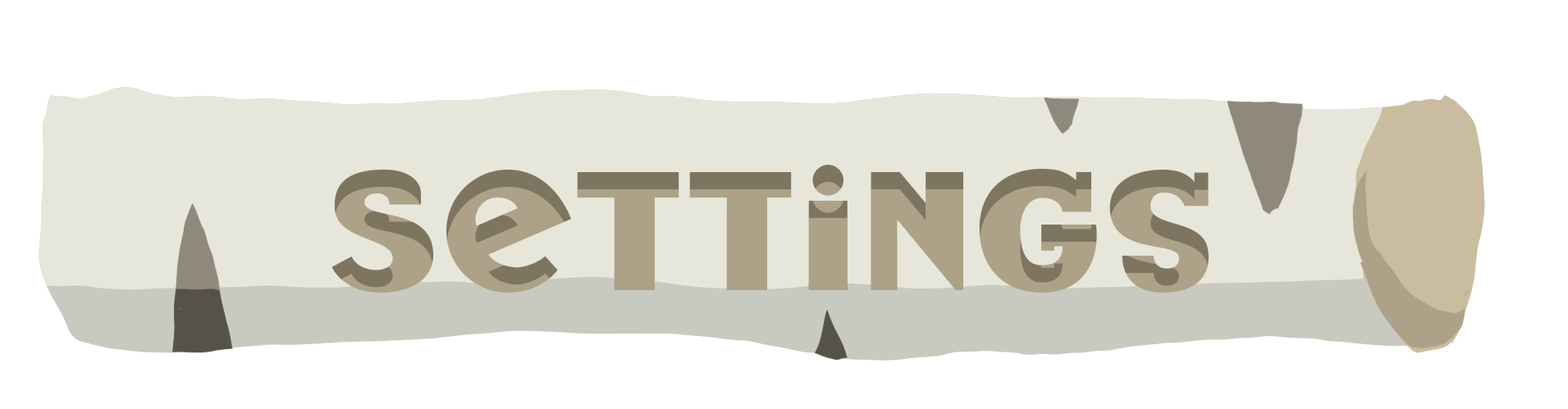
<style>
.page{position:relative;width:1568px;height:409px;background:#ffffff}
.page>*{position:absolute;margin:0}
.t1{font:164.1px "BadTyp-Regular";color:#ada288}
</style>
<div class="page">
<p class="t1" style="left:331px;top:165px;width:878px;height:129px">Settings</p>
</div>
